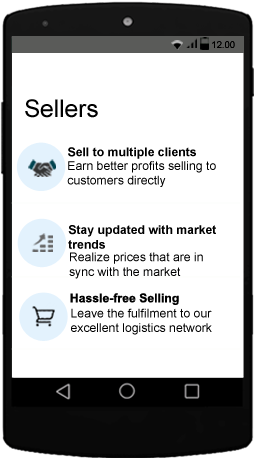
<style>
.page{position:relative;width:256px;height:460px;background:#ffffff}
.page>*{position:absolute;margin:0}
.t1{font:9.5px "ArialMT";color:#000000}
.t2{font:24.5px "ArialMT";color:#000000}
.t3{font:12.2px "Arial-BoldMT";color:#000000}
.t4{font:12.2px "ArialMT";color:#000000}
</style>
<div class="page">
<p class="t1" style="left:212px;top:41px;width:23px;height:7px">12.00</p>
<p class="t2" style="left:25px;top:99px;width:73px;height:19px">Sellers</p>
<p class="t3" style="left:68px;top:147px;width:128px;height:12px">Sell to multiple clients</p>
<p class="t4" style="left:67px;top:161px;width:149px;height:26px">Earn better profits selling to customers directly</p>
<p class="t3" style="left:68px;top:225px;width:148px;height:24px">Stay updated with market <br>trends</p>
<p class="t4" style="left:69px;top:252px;width:134px;height:27px">Realize prices that are in sync with the market</p>
<p class="t3" style="left:70px;top:293px;width:109px;height:12px">Hassle-free Selling</p>
<p class="t4" style="left:71px;top:308px;width:141px;height:27px">Leave the fulfilment to our excellent logistics network</p>
</div>
